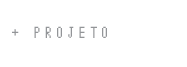
<style>
.page{position:relative;width:187px;height:67px;background:#ffffff}
.page>*{position:absolute;margin:0}
.t1{font:15px "Terminal";color:#939598}
</style>
<div class="page">
<p class="t1" style="left:12px;top:26px;width:95px;height:12px">+ PROJETO</p>
</div>
